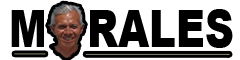
<style>
.page{position:relative;width:240px;height:60px;background:#ffffff}
.page>*{position:absolute;margin:0}
.t1{font:51.5px "Arial-Black";color:#000000;scale:0.78 1}
</style>
<div class="page">
<p class="t1" style="left:11px;top:9px;width:222px;height:39px">M   RALES</p>
</div>
